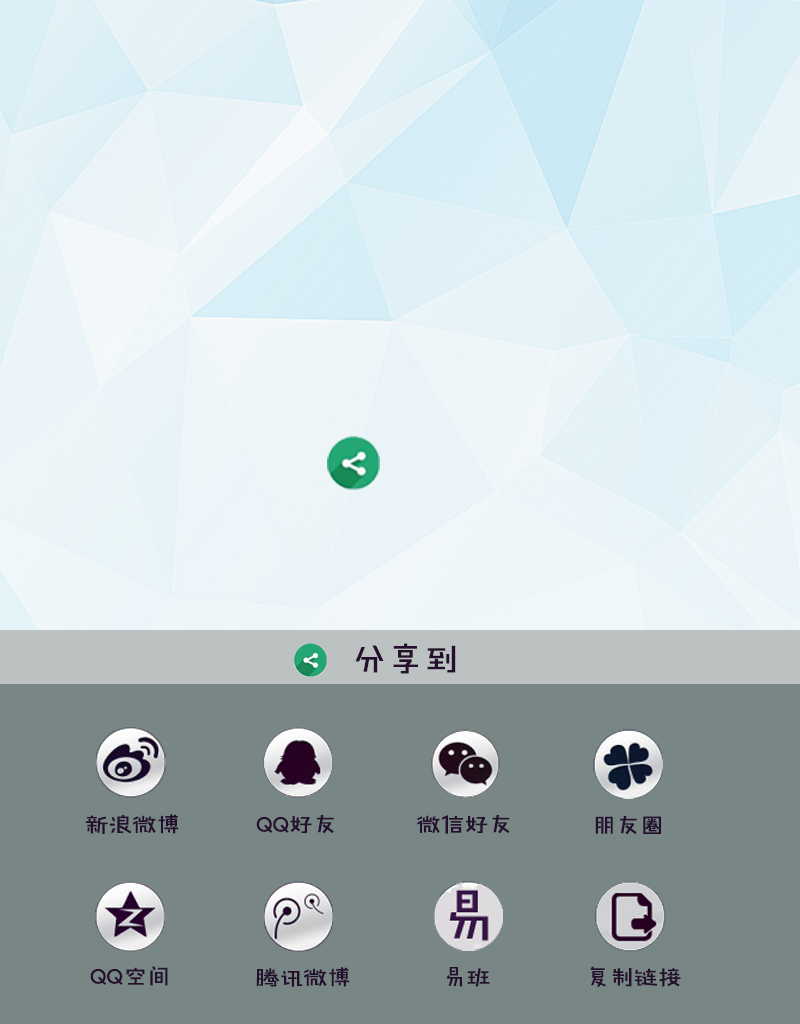
<style>
.page{position:relative;width:800px;height:1024px;background:#788685}
.page>*{position:absolute;margin:0}
.t1{font:36px "FZJHJW-GB1-0";color:#24102d}
.t2{font:24px "FZJHJW-GB1-0";color:#24102d}
</style>
<div class="page">
<p class="t1" style="left:355px;top:643px;width:101px;height:31px">分享到</p>
<p class="t2" style="left:85px;top:814px;width:94px;height:20px">新浪微博</p>
<p class="t2" style="left:256px;top:815px;width:78px;height:19px">QQ好友</p>
<p class="t2" style="left:417px;top:815px;width:93px;height:19px">微信好友</p>
<p class="t2" style="left:595px;top:816px;width:66px;height:19px">朋友圈</p>
<p class="t2" style="left:90px;top:966px;width:78px;height:20px">QQ空间</p>
<p class="t2" style="left:590px;top:966px;width:91px;height:21px">复制链接</p>
<p class="t2" style="left:256px;top:967px;width:94px;height:20px">腾讯微博</p>
<p class="t2" style="left:447px;top:967px;width:43px;height:20px">易班</p>
</div>
